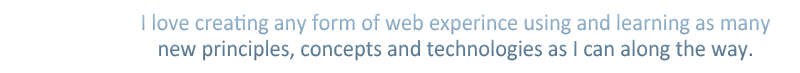
<style>
.page{position:relative;width:800px;height:73px;background:#ffffff}
.page>*{position:absolute;margin:0}
.t1{font:23.8px "Calibri";scale:0.94 1}
</style>
<div class="page">
<p class="t1" style="left:142px;top:13px;width:629px;height:48px;text-align:center">I love creating any form of web experince using and learning as many <br>new principles, concepts and technologies as I can along the way.</p>
</div>
